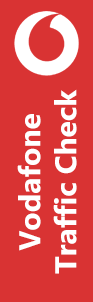
<style>
.page{position:relative;width:93px;height:302px;background:#d93333}
.page>*{position:absolute;margin:0}
.t1{font:30px "MicrosoftTaiLe-Bold";color:#ffffff}
</style>
<div class="page">
<p class="t1" style="left:17px;top:89px;width:60px;height:185px;text-align:center;rotate:-90deg">Vodafone<br>Traffic Check</p>
</div>
